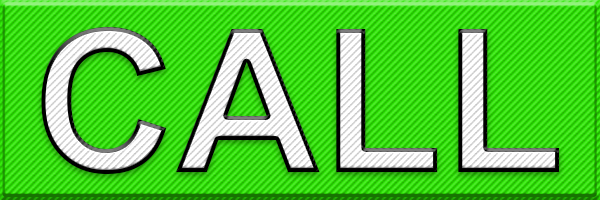
<style>
.page{position:relative;width:600px;height:200px}
.page>*{position:absolute;margin:0}
.t1{font:200px "Arial-BoldMT"}
</style>
<div class="page">
<p class="t1" style="left:41px;top:27px;width:519px;height:147px">CALL</p>
</div>
